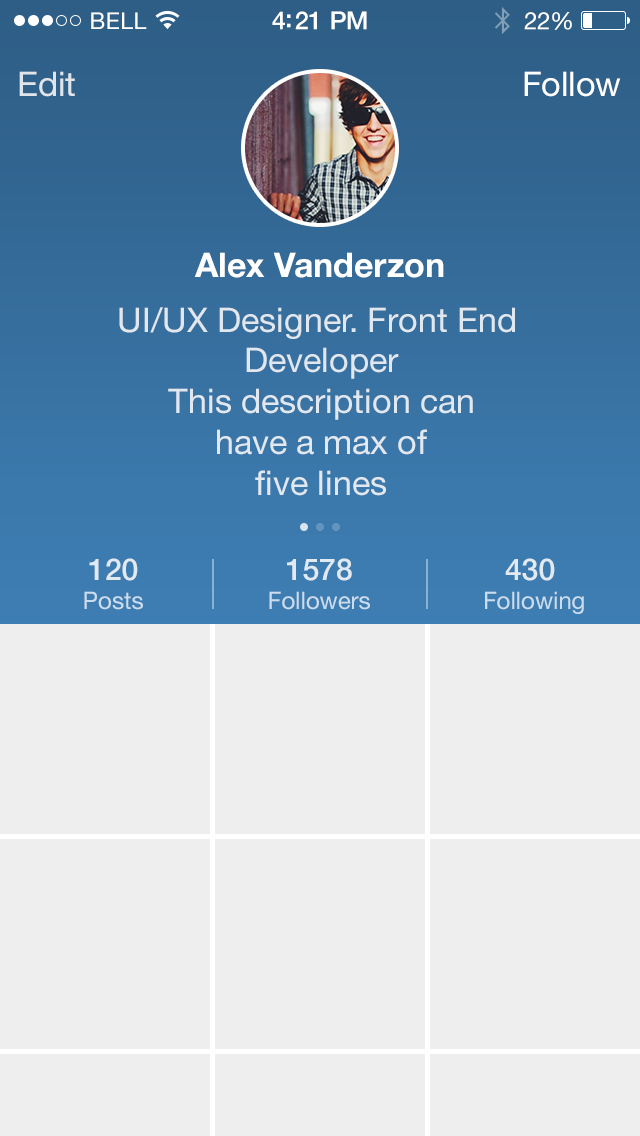
<style>
.page{position:relative;width:640px;height:1136px;background:#eeeeee}
.page>*{position:absolute;margin:0}
.t1{font:23px "HelveticaNeue";letter-spacing:0.02em;color:#ffffff}
.t2{font:25px "HelveticaNeue-Medium";letter-spacing:-0.02em;color:#ffffff}
.t3{font:24px "HelveticaNeue";letter-spacing:-0.02em;color:#ffffff}
.t4{font:34px "HelveticaNeue";color:#e0e5eb}
.t5{font:34px "HelveticaNeue";color:#ffffff}
.t6{font:34px "HelveticaNeue-Bold";color:#ffffff}
.t7{font:34px "HelveticaNeue";color:#e1e7ef}
.t8{font:24px "HelveticaNeue";color:#e4f0fc}
.t9{font:30px "HelveticaNeue-Medium";color:#ffffff}
.t10{font:24px "HelveticaNeue"}
.t11{font:30px "HelveticaNeue-Medium"}
</style>
<div class="page">
<p class="t1" style="left:91px;top:12px;width:56px;height:17px">BELL</p>
<p class="t2" style="left:272px;top:11px;width:95px;height:19px">4:21 PM</p>
<p class="t3" style="left:524px;top:12px;width:48px;height:18px">22%</p>
<p class="t4" style="left:19px;top:71px;width:56px;height:26px">Edit</p>
<p class="t5" style="left:524px;top:71px;width:97px;height:26px">Follow</p>
<p class="t6" style="left:194px;top:252px;width:250px;height:26px">Alex Vanderzon</p>
<p class="t7" style="left:119px;top:307px;width:396px;height:189px;text-align:center">UI/UX Designer. Front End <br>Developer<br>This description can<br>have a max of<br>five lines</p>
<p class="t8" style="left:84px;top:558px;width:59px;height:52px;text-align:center;opacity:0.8"><span class="t9">120<br></span>Posts</p>
<p class="t10" style="left:269px;top:558px;width:101px;height:52px;text-align:center"><span class="t11">1578<br></span>Followers</p>
<p class="t10" style="left:485px;top:558px;width:99px;height:56px;text-align:center"><span class="t11">430 <br></span>Following</p>
</div>
